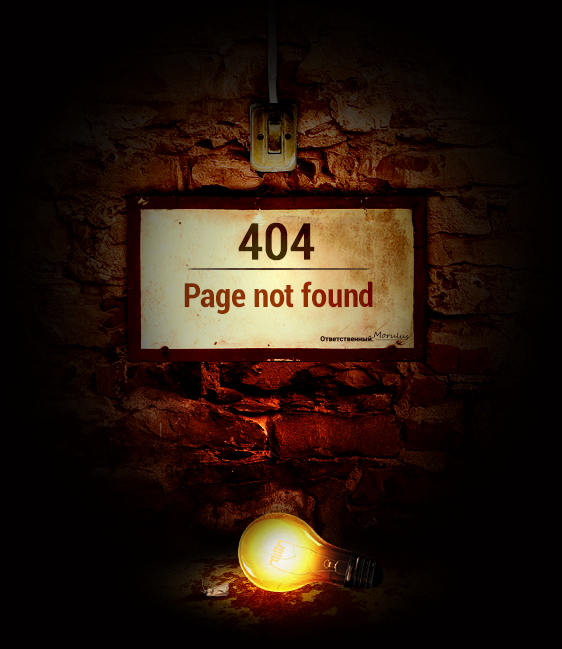
<style>
.page{position:relative;width:562px;height:649px;background:#020000}
.page>*{position:absolute;margin:0}
.t1{font:50.3px "Roboto-Condensed";letter-spacing:-0.01em;color:#3c1a00;font-weight:bold}
.t2{font:33px "Roboto-BoldCondensed";letter-spacing:-0.01em;color:#882b00}
</style>
<div class="page">
<p class="t1" style="left:238px;top:222px;width:77px;height:39px">404</p>
<p class="t2" style="left:184px;top:281px;width:189px;height:33px">Page not found</p>
</div>
